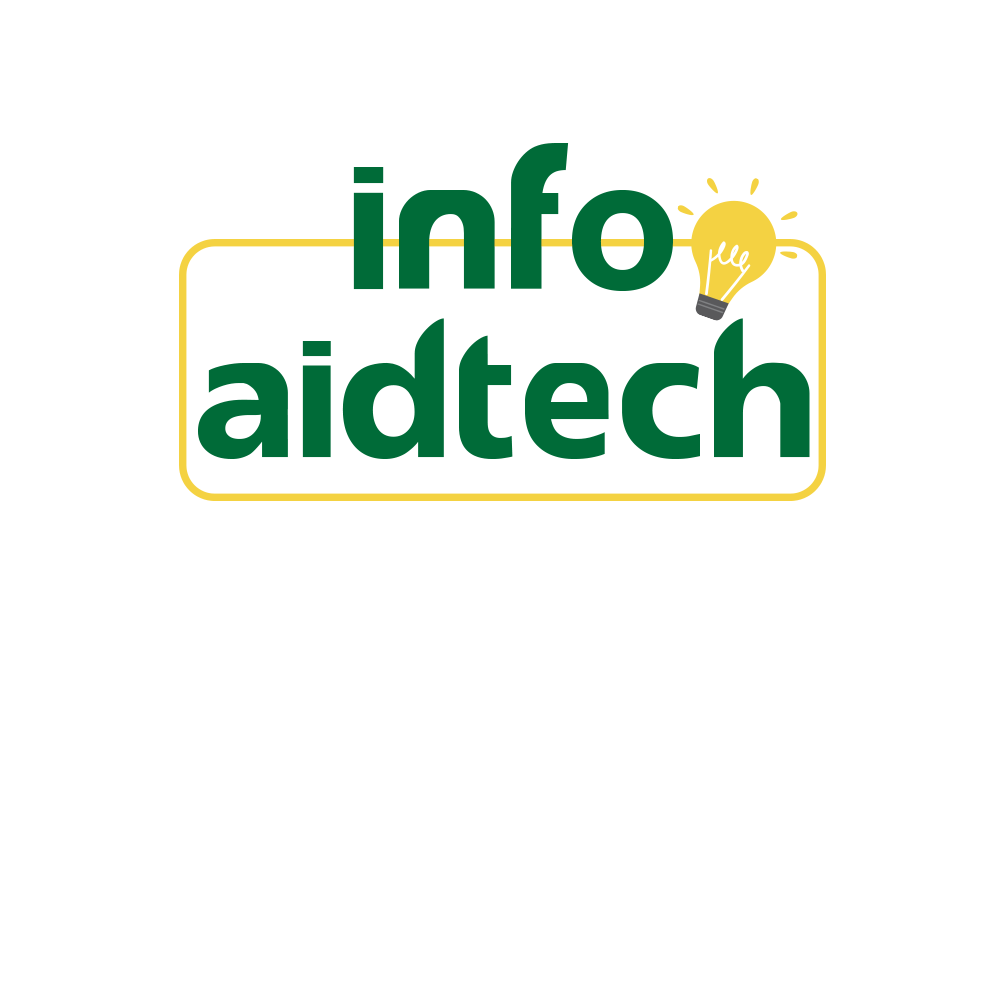
<style>
.page{position:relative;width:1000px;height:1000px;background:#ffffff}
.page>*{position:absolute;margin:0}
.t1{font:123.3px "reasonSystem-Regular";letter-spacing:0.05em;color:#006b38}
.t2{font:123.3px "reasonSystem-Regular";letter-spacing:-0.05em;color:#006b38}
.t3{font:116.5px "reasonSystem-Regular";letter-spacing:0.05em;color:#006b38}
</style>
<div class="page">
<p class="t1" style="left:353px;top:143px;width:320px;height:148px">IN<span class="t2">FO</span></p>
<p class="t3" style="left:198px;top:318px;width:612px;height:141px">aidTech</p>
</div>
